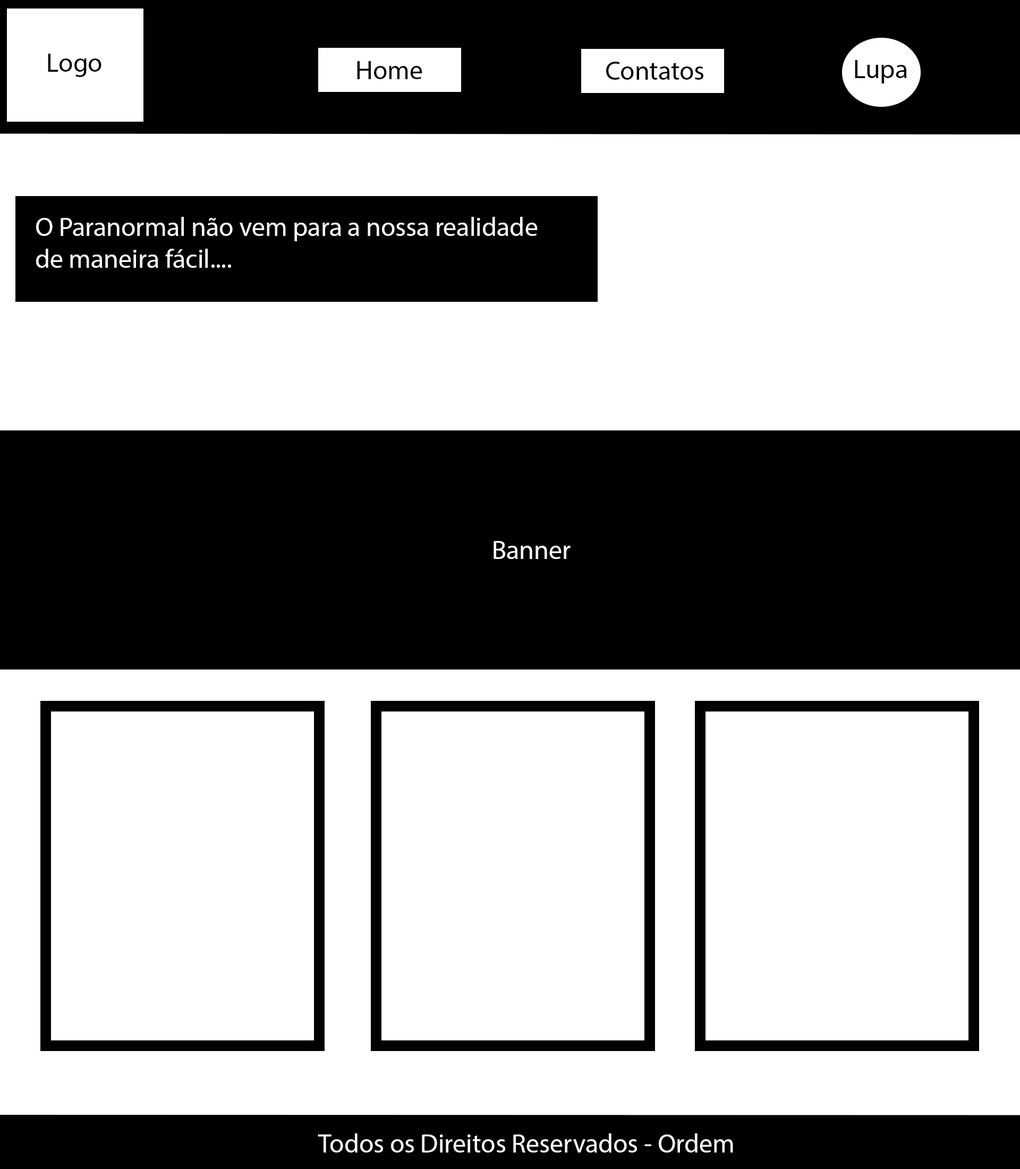
<style>
.page{position:relative;width:1020px;height:1169px;background:#ffffff}
.page>*{position:absolute;margin:0}
.t1{font:26.6px "MyriadPro-Regular";color:#000000}
.t2{font:26.6px "MyriadPro-Regular";color:#ffffff}
.t3{font:26.6px "MyriadPro-Regular";color:#fffefe}
</style>
<div class="page">
<p class="t1" style="left:48px;top:54px;width:53px;height:23px">Logo</p>
<p class="t1" style="left:357px;top:61px;width:65px;height:18px">Home</p>
<p class="t1" style="left:606px;top:62px;width:97px;height:18px">Contatos</p>
<p class="t1" style="left:855px;top:60px;width:52px;height:23px">Lupa</p>
<p class="t2" style="left:36px;top:217px;width:502px;height:51px">O Paranormal não vem para a nossa realidade de maneira fácil....</p>
<p class="t3" style="left:494px;top:541px;width:77px;height:18px">Banner</p>
<p class="t3" style="left:318px;top:1133px;width:415px;height:19px">Todos os Direitos Reservados - Ordem</p>
</div>
